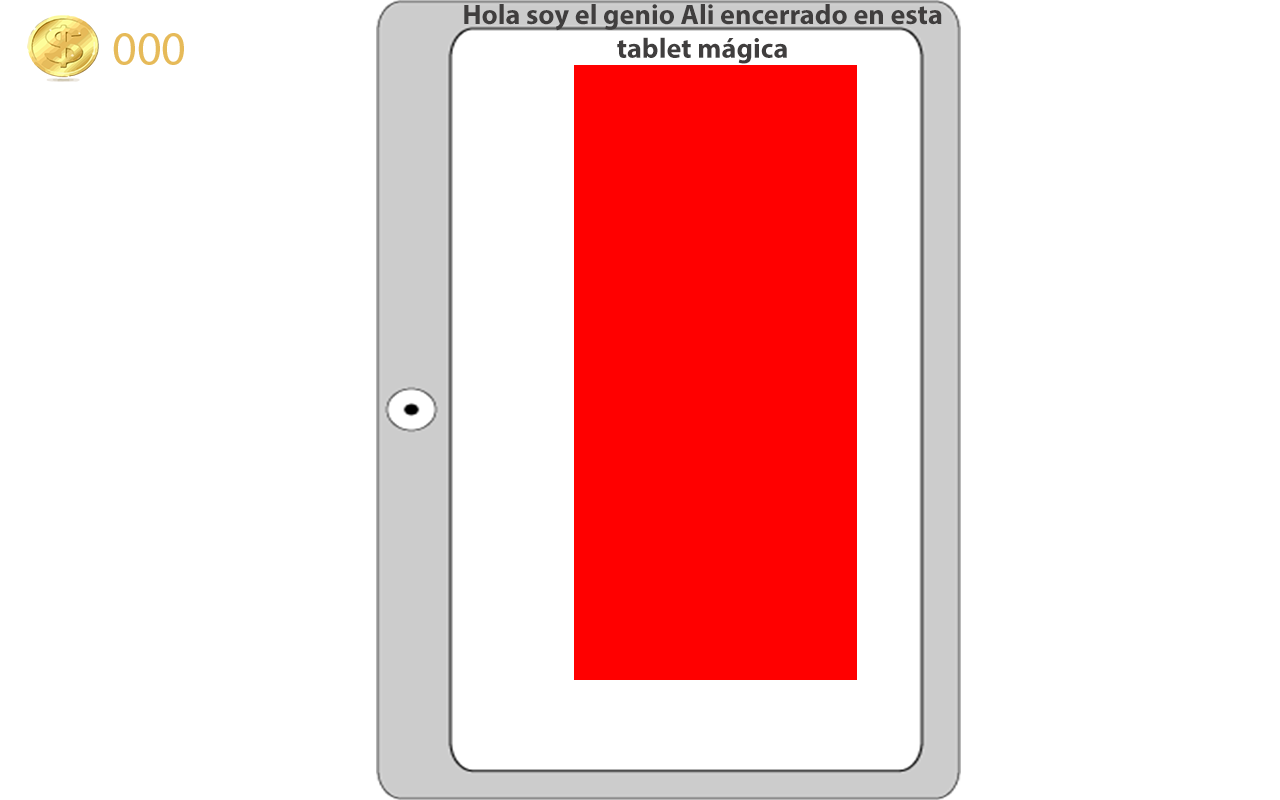
<style>
.page{position:relative;width:1280px;height:800px;background:#ffffff}
.page>*{position:absolute;margin:0}
.t1{font:28.2px "MyriadPro-Bold";color:#403e3e}
</style>
<div class="page">
<p class="t1" style="left:464px;top:4px;width:478px;height:60px;text-align:center">Hola soy el genio Ali encerrado en esta tablet mágica</p>
</div>
